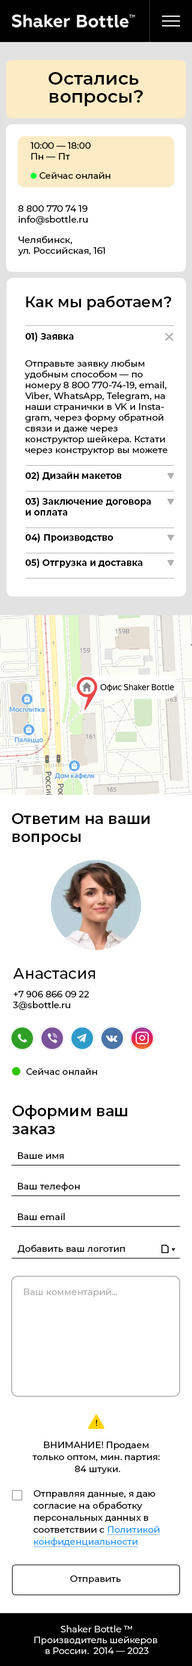
<style>
.page{position:relative;width:192px;height:1666px;background:#ffffff}
.page>*{position:absolute;margin:0}
.t1{font:18px/18px "Montserrat-SemiBold";color:#000000}
.t2{font:9px "Montserrat-Medium";color:#000000}
.t3{font:15px "Montserrat-SemiBold";color:#000000}
.t4{font:9px "Montserrat-Bold";color:#000000}
.t5{font:9px "Montserrat-Medium";color:#010101}
.t6{font:15px "Montserrat-Medium";color:#000000}
.t7{font:9px "Montserrat-Medium";color:#b1b1b1}
.t8{font:8.4px "Montserrat-Medium";color:#000000}
.t9{font:9px/12px "Montserrat-Medium";color:#000000}
.t10{font:9px/12px "Montserrat-Medium";color:#2899f8;text-decoration:underline}
.t11{font:9px "Montserrat-Regular";color:#fffefe}
</style>
<div class="page">
<p class="t1" style="left:49px;top:72px;width:94px;height:34px;text-align:center">Остались <br>вопросы?</p>
<p class="t2" style="left:30px;top:142px;width:61px;height:18px">10:00 — 18:00<br>Пн — Пт</p>
<p class="t2" style="left:40px;top:172px;width:70px;height:7px">Сейчас онлайн</p>
<p class="t2" style="left:18px;top:205px;width:70px;height:19px">8 800 770 74 19<br>info@sbottle.ru</p>
<p class="t2" style="left:18px;top:236px;width:87px;height:20px">Челябинск,<br>ул. Российская, 161</p>
<p class="t3" style="left:26px;top:295px;width:146px;height:15px">Как мы работаем?</p>
<p class="t4" style="left:25px;top:332px;width:49px;height:9px">01) Заявка</p>
<p class="t5" style="left:25px;top:359px;width:142px;height:96px">Отправьте заявку любым удобным способом — по номеру 8 800 770-74-19, email, Viber, WhatsApp, Telegram, на наши странички в VK и Instagram, через форму обратной связи и даже через конструктор шейкера. Кстати через конструктор вы можете сразу дать понять менеджеру шейкеры в каких цветах вам больше нравятся.</p>
<p class="t4" style="left:25px;top:472px;width:97px;height:9px">02) Дизайн макетов</p>
<p class="t4" style="left:25px;top:497px;width:126px;height:18px">03) Заключение договора <br>и оплата</p>
<p class="t4" style="left:25px;top:533px;width:88px;height:9px">04) Производство</p>
<p class="t4" style="left:25px;top:559px;width:118px;height:9px">05) Отгрузка и доставка</p>
<p class="t3" style="left:12px;top:813px;width:138px;height:32px">Ответим на ваши <br>вопросы</p>
<p class="t6" style="left:13px;top:968px;width:82px;height:11px">Анастасия</p>
<p class="t2" style="left:13px;top:991px;width:76px;height:19px">+7 906 866 09 22<br>3@sbottle.ru</p>
<p class="t2" style="left:26px;top:1067px;width:71px;height:8px">Сейчас онлайн</p>
<p class="t3" style="left:12px;top:1105px;width:115px;height:29px">Оформим ваш <br>заказ</p>
<p class="t2" style="left:18px;top:1152px;width:46px;height:7px">Ваше имя</p>
<p class="t2" style="left:18px;top:1182px;width:62px;height:9px">Ваш телефон</p>
<p class="t2" style="left:18px;top:1213px;width:47px;height:7px">Ваш email</p>
<p class="t2" style="left:17px;top:1244px;width:108px;height:9px">Добавить ваш логотип</p>
<p class="t7" style="left:24px;top:1288px;width:94px;height:9px">Ваш комментарий...</p>
<p class="t8" style="left:95px;top:1420px;width:2px;height:6px">!</p>
<p class="t9" style="left:32px;top:1441px;width:128px;height:33px;text-align:center">ВНИМАНИЕ! Продаем <br>только оптом, мин. партия: <br>84 штуки.</p>
<p class="t9" style="left:33px;top:1490px;width:127px;height:57px;text-align:right">Отправляя данные, я даю согласие на обработку персональных данных в соответствии с <span class="t10">Политикой конфиденциальности</span></p>
<p class="t5" style="left:70px;top:1575px;width:51px;height:8px">Отправить</p>
<p class="t11" style="left:34px;top:1625px;width:123px;height:29px;text-align:center">Shaker Bottle ™<br>Производитель шейкеров <br>в России.  2014 — 2023</p>
</div>
